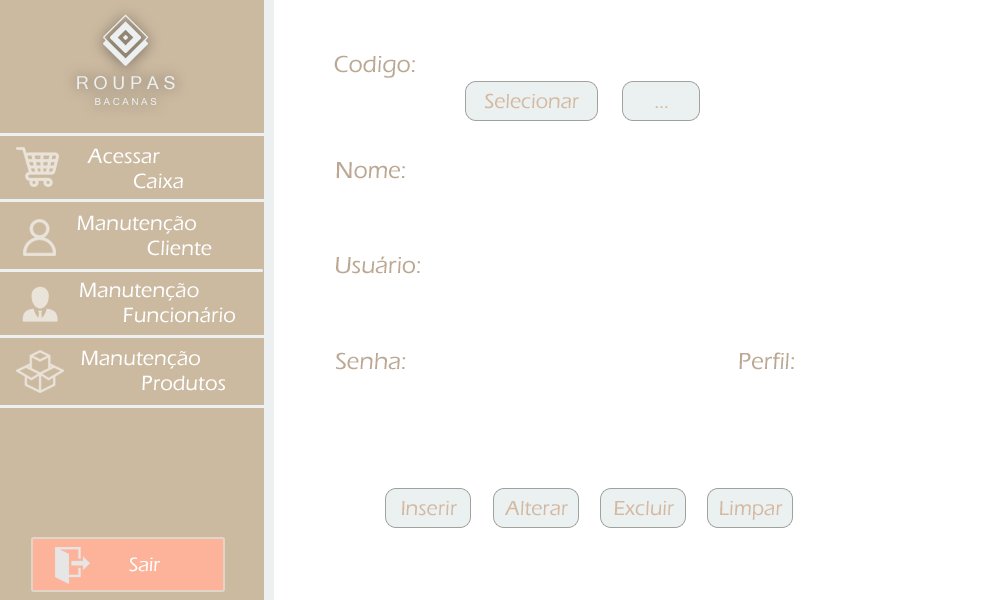
<style>
.page{position:relative;width:1000px;height:600px;background:#ffffff}
.page>*{position:absolute;margin:0}
.t1{font:23.9px "ErasITC-Medium";color:#bba792}
.t2{font:17.8px "MicrosoftSansSerif";color:#ecf0f1}
.t3{font:9.7px "MicrosoftSansSerif";color:#ecf0f1}
.t4{font:20.9px "ErasITC-Medium";color:#d4b9a0}
.t5{font:21.3px "ErasITC-Medium";color:#ffffff}
.t6{font:20px "ErasITC-Medium";color:#ffffff}
</style>
<div class="page">
<p class="t1" style="left:334px;top:55px;width:81px;height:23px">Codigo:</p>
<p class="t2" style="left:77px;top:76px;width:98px;height:14px">R O U P A S</p>
<p class="t3" style="left:95px;top:98px;width:62px;height:7px">B A C A N A S</p>
<p class="t4" style="left:485px;top:93px;width:94px;height:16px">Selecionar</p>
<p class="t4" style="left:655px;top:106px;width:13px;height:2px">...</p>
<p class="t5" style="left:87px;top:148px;width:96px;height:41px;text-align:center">Acessar<br>             Caixa</p>
<p class="t1" style="left:336px;top:162px;width:69px;height:17px">Nome:</p>
<p class="t5" style="left:77px;top:215px;width:135px;height:41px;text-align:center">Manutenção<br>                      Cliente</p>
<p class="t1" style="left:336px;top:256px;width:84px;height:18px">Usuário:</p>
<p class="t5" style="left:80px;top:282px;width:155px;height:41px;text-align:center">Manutenção <br>                       Funcionário</p>
<p class="t5" style="left:81px;top:350px;width:144px;height:41px;text-align:center">Manutenção <br>                         Produtos</p>
<p class="t1" style="left:336px;top:352px;width:69px;height:18px">Senha:</p>
<p class="t1" style="left:739px;top:352px;width:55px;height:18px">Perfil:</p>
<p class="t4" style="left:402px;top:501px;width:55px;height:15px">Inserir</p>
<p class="t4" style="left:504px;top:501px;width:64px;height:15px">Alterar</p>
<p class="t4" style="left:614px;top:501px;width:60px;height:15px">Excluir</p>
<p class="t4" style="left:720px;top:501px;width:63px;height:19px">Limpar</p>
<p class="t6" style="left:129px;top:557px;width:31px;height:15px">Sair</p>
</div>
